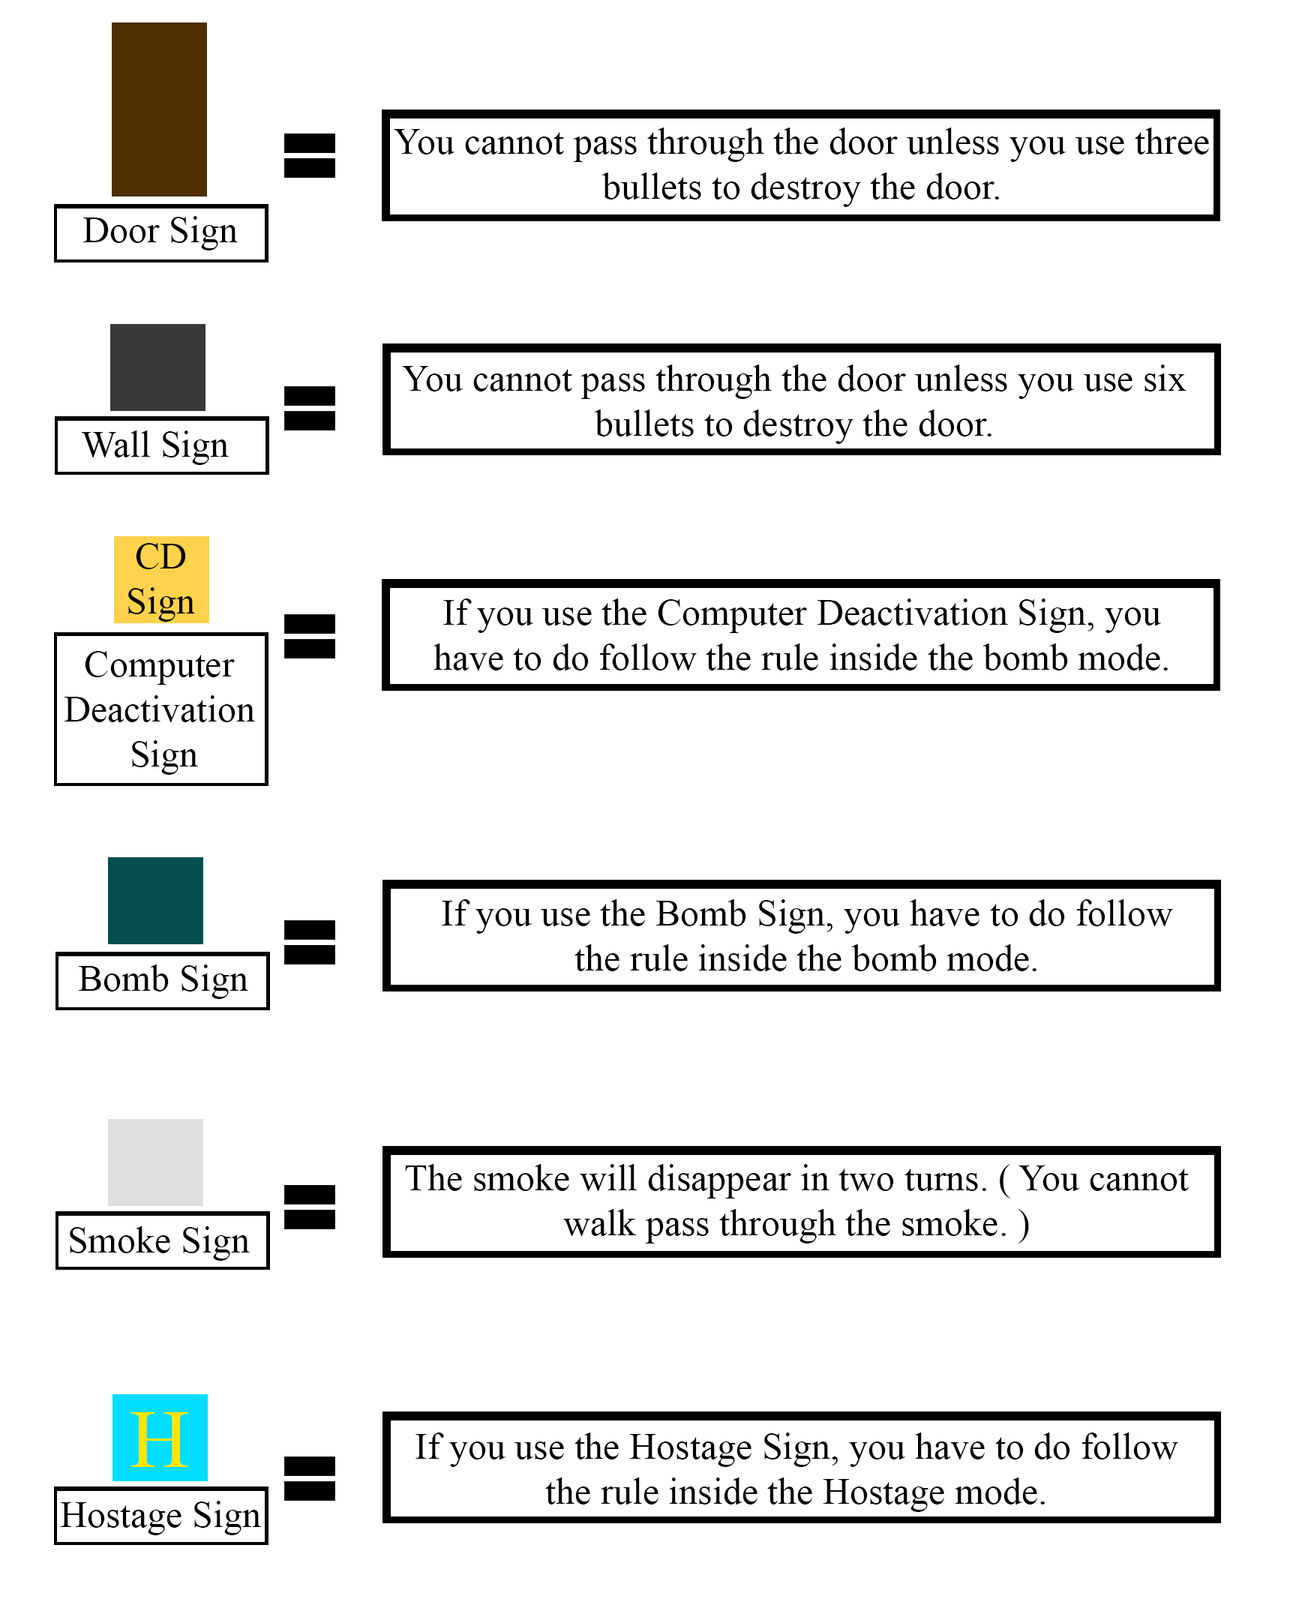
<style>
.page{position:relative;width:1296px;height:1605px;background:#ffffff}
.page>*{position:absolute;margin:0}
.t1{font:9px "TimesNewRomanPSMT";color:#000000}
.t2{font:19.8px "TimesNewRomanPSMT";color:#ffe400}
</style>
<div class="page">
<p class="t1" style="left:394px;top:128px;width:815px;height:79px;text-align:center">You cannot pass through the door unless you use three bullets to destroy the door.</p>
<p class="t1" style="left:82px;top:216px;width:156px;height:34px;text-align:center">Door Sign</p>
<p class="t1" style="left:402px;top:364px;width:784px;height:80px;text-align:center">You cannot pass through the door unless you use six bullets to destroy the door.</p>
<p class="t1" style="left:81px;top:430px;width:148px;height:35px;text-align:center">Wall Sign</p>
<p class="t1" style="left:128px;top:543px;width:67px;height:79px;text-align:center">CD<br>Sign</p>
<p class="t1" style="left:434px;top:598px;width:734px;height:72px;text-align:center">If you use the Computer Deactivation Sign, you have to do follow the rule inside the bomb mode.</p>
<p class="t1" style="left:64px;top:651px;width:191px;height:124px;text-align:center">Computer <br>Deactivation <br>Sign</p>
<p class="t1" style="left:442px;top:899px;width:731px;height:72px;text-align:center">If you use the Bomb Sign, you have to do follow the rule inside the bomb mode.</p>
<p class="t1" style="left:78px;top:964px;width:170px;height:35px;text-align:center">Bomb Sign</p>
<p class="t1" style="left:405px;top:1164px;width:784px;height:80px;text-align:center">The smoke will disappear in two turns. ( You cannot walk pass through the smoke. )</p>
<p class="t1" style="left:70px;top:1226px;width:180px;height:35px;text-align:center">Smoke Sign</p>
<p class="t2" style="left:130px;top:1412px;width:58px;height:55px;text-align:center">H</p>
<p class="t1" style="left:416px;top:1432px;width:762px;height:80px;text-align:center">If you use the Hostage Sign, you have to do follow the rule inside the Hostage mode.</p>
<p class="t1" style="left:60px;top:1501px;width:201px;height:34px;text-align:center">Hostage Sign</p>
</div>
